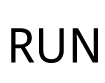
<style>
.page{position:relative;width:105px;height:83px;background:#ffffff}
.page>*{position:absolute;margin:0}
.t1{font:47.9px "DroidSans";color:#000000}
</style>
<div class="page">
<p class="t1" style="left:11px;top:28px;width:87px;height:35px">RUN</p>
</div>
